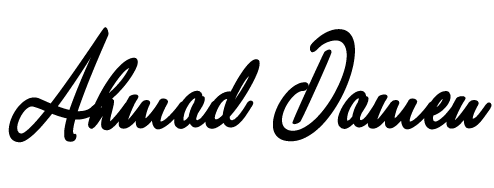
<style>
.page{position:relative;width:494px;height:188px;background:#ffffff}
.page>*{position:absolute;margin:0}
.t1{font:61.8px/58px "AnastasiaScriptPersonalUse-Regu";color:#000000;font-weight:bold;scale:0.72 1}
</style>
<div class="page">
<p class="t1" style="left:8px;top:27px;width:484px;height:116px">Ahmad  Damen</p>
</div>
